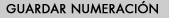
<style>
.page{position:relative;width:169px;height:18px;background:#cccccc}
.page>*{position:absolute;margin:0}
.t1{font:12px "FuturaLT-Book";letter-spacing:0.025em;color:#000000;font-weight:bold}
</style>
<div class="page">
<p class="t1" style="left:6px;top:1px;width:152px;height:13px">GUARDAR NUMERACIÓN</p>
</div>
